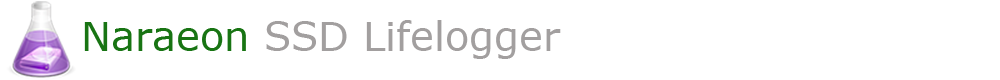
<style>
.page{position:relative;width:1000px;height:80px;background:#ffffff}
.page>*{position:absolute;margin:0}
.t1{font:40px "Verdana";color:#a29f9f}
.t2{font:40px "Verdana";color:#187413}
</style>
<div class="page">
<p class="t1" style="left:84px;top:20px;width:477px;height:39px"><span class="t2">Naraeon</span> SSD Lifelogger</p>
</div>
